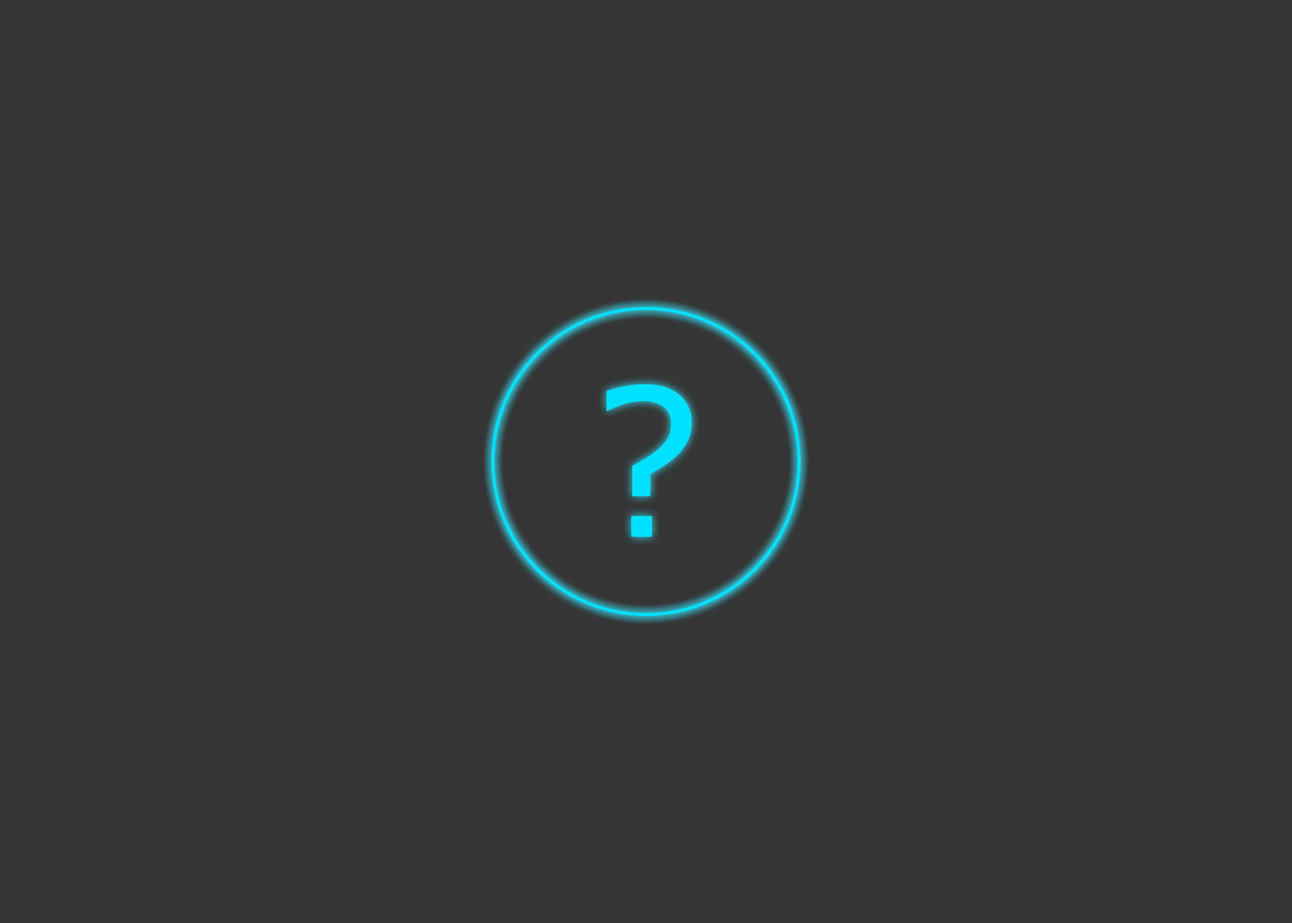
<style>
.page{position:relative;width:1292px;height:923px;background:#353535}
.page>*{position:absolute;margin:0}
.t1{font:206.4px "MSReferenceSansSerif";letter-spacing:0.1em;color:#00e1ff;text-transform:uppercase}
</style>
<div class="page">
<p class="t1" style="left:606px;top:384px;width:86px;height:153px">?</p>
</div>
